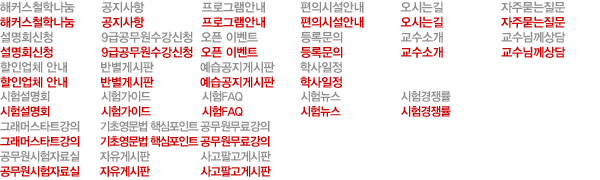
<style>
.page{position:relative;width:600px;height:180px;background:#ffffff}
.page>*{position:absolute;margin:0}
.t1{font:12.5px "YDIYGO340";letter-spacing:-0.025em;color:#8f8f8f;scale:0.95 1}
.t2{font:12.5px "YDIYGO340";letter-spacing:-0.025em;color:#cc0000;scale:0.95 1}
.t3{font:12px "YDIYGO340";letter-spacing:-0.05em;color:#8f8f8f;scale:0.95 1}
.t4{font:12px "YDIYGO340";letter-spacing:-0.05em;color:#cc0000;scale:0.95 1}
.t5{font:12px "YDIYGO340";letter-spacing:-0.09em;color:#8f8f8f;scale:0.95 1}
.t6{font:12px "YDIYGO340";letter-spacing:-0.09em;color:#cc0000;scale:0.95 1}
</style>
<div class="page">
<p class="t1" style="left:0px;top:1px;width:565px;height:12px">해커스철학나눔       공지사항               프로그램안내         편의시설안내          오시는길               자주묻는질문</p>
<p class="t2" style="left:0px;top:16px;width:565px;height:12px">해커스철학나눔       공지사항               프로그램안내         편의시설안내          오시는길               자주묻는질문</p>
<p class="t1" style="left:0px;top:31px;width:566px;height:12px">설명회신청             9급공무원수강신청  오픈 이벤트           등록문의               교수소개               교수님께상담</p>
<p class="t2" style="left:0px;top:46px;width:566px;height:12px">설명회신청             9급공무원수강신청  오픈 이벤트           등록문의               교수소개               교수님께상담</p>
<p class="t1" style="left:0px;top:61px;width:342px;height:12px">할인업체 안내         반별게시판            예습공지게시판       학사일정</p>
<p class="t2" style="left:0px;top:76px;width:342px;height:12px">할인업체 안내         반별게시판            예습공지게시판       학사일정</p>
<p class="t3" style="left:0px;top:91px;width:451px;height:11px">시험설명회               시험가이드               시험FAQ                 시험뉴스                  시험경쟁률</p>
<p class="t4" style="left:0px;top:106px;width:451px;height:11px">시험설명회               시험가이드               시험FAQ                 시험뉴스                  시험경쟁률</p>
<p class="t5" style="left:0px;top:121px;width:270px;height:11px"><span class="t3">그래머스타트강의      </span>기초영문법 핵심포인트 <span class="t3">공무원무료강의</span></p>
<p class="t6" style="left:0px;top:136px;width:270px;height:11px"><span class="t4">그래머스타트강의      </span>기초영문법 핵심포인트 <span class="t4">공무원무료강의</span></p>
<p class="t3" style="left:0px;top:151px;width:271px;height:11px">공무원시험자료실      자유게시판               사고팔고게시판</p>
<p class="t4" style="left:0px;top:166px;width:271px;height:11px">공무원시험자료실      자유게시판               사고팔고게시판</p>
</div>
